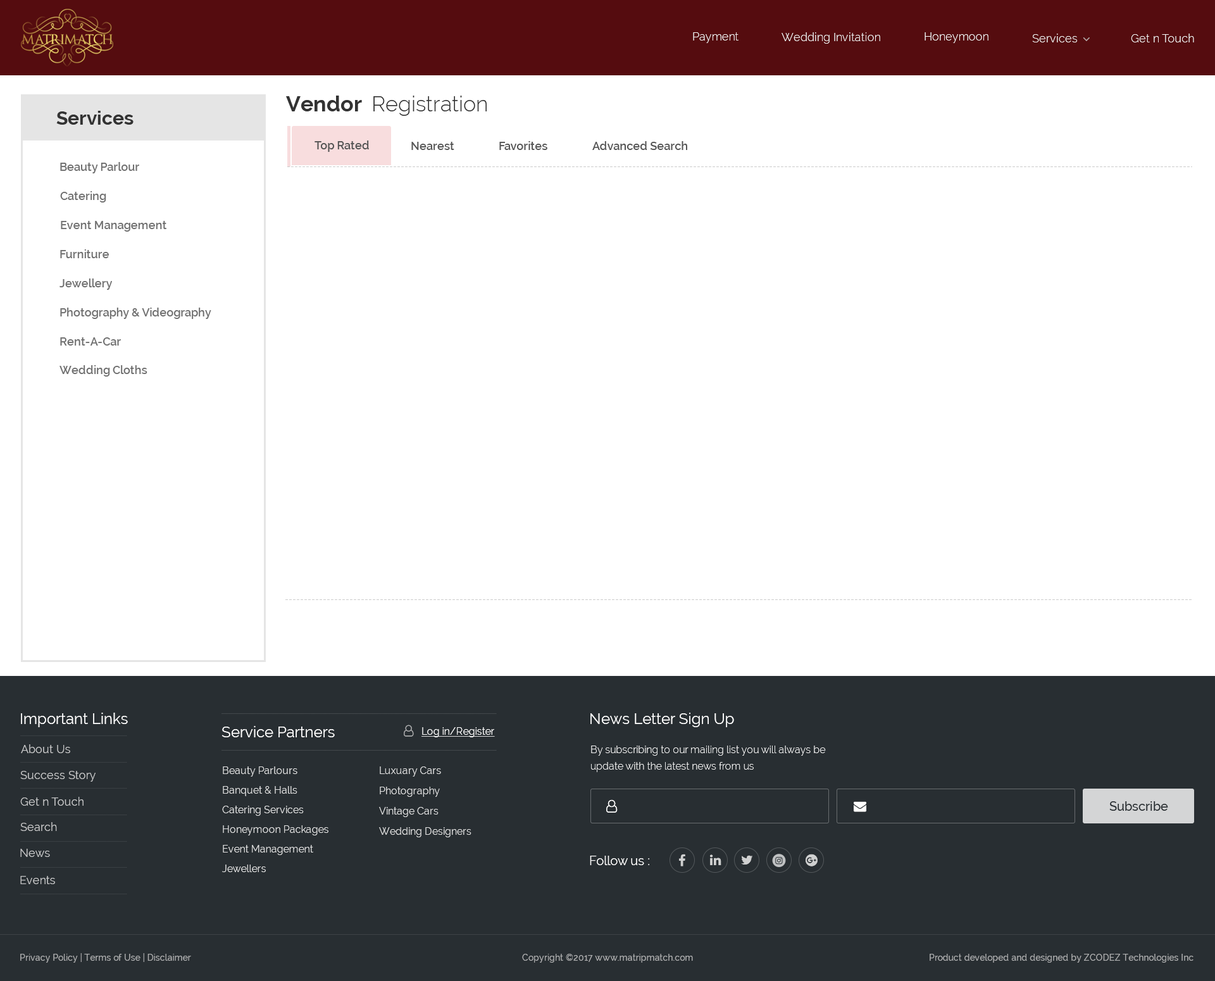
<style>
.page{position:relative;width:1215px;height:981px;background:#ffffff}
.page>*{position:absolute;margin:0}
.t1{font:11.4px "Raleway-Light";color:#ffffff}
.t2{font:21.5px "Raleway-Light";color:#333333}
.t3{font:21.5px "Raleway-Bold";color:#333333}
.t4{font:19px "Raleway-Bold";color:#333333}
.t5{font:11.4px "Raleway-SemiBold";color:#555555}
.t6{font:11.4px "Raleway-SemiBold";color:#707070}
.t7{font:15.2px "Raleway";color:#ffffff}
.t8{font:10.1px "Raleway";color:#ffffff;text-decoration:underline}
.t9{font:11.4px "Raleway";color:#c6c7c8}
.t10{font:10.1px/16.5px "Raleway-Light";color:#ffffff}
.t11{font:10.1px/19.6px "Raleway";color:#e0e0e0}
.t12{font:10.1px/20.3px "Raleway";color:#e0e0e0}
.t13{font:12.7px "Raleway-Medium";color:#282e32}
.t14{font:12.7px "Raleway";color:#ffffff}
.t15{font:8.9px "Raleway-Medium";color:#abacad}
</style>
<div class="page">
<p class="t1" style="left:693px;top:32px;width:46px;height:11px">Payment</p>
<p class="t1" style="left:782px;top:32px;width:98px;height:12px">Wedding Invitation</p>
<p class="t1" style="left:925px;top:32px;width:64px;height:11px">Honeymoon</p>
<p class="t1" style="left:1032px;top:34px;width:45px;height:8px">Services</p>
<p class="t1" style="left:1131px;top:34px;width:63px;height:8px">Get n Touch</p>
<p class="t2" style="left:286px;top:96px;width:201px;height:20px"><span class="t3">Vendor  </span>Registration</p>
<p class="t4" style="left:56px;top:111px;width:78px;height:14px">Services</p>
<p class="t5" style="left:315px;top:141px;width:54px;height:11px">Top Rated</p>
<p class="t5" style="left:411px;top:142px;width:43px;height:8px">Nearest</p>
<p class="t5" style="left:499px;top:141px;width:49px;height:9px">Favorites</p>
<p class="t5" style="left:592px;top:141px;width:95px;height:9px">Advanced Search</p>
<p class="t6" style="left:60px;top:162px;width:79px;height:11px">Beauty Parlour</p>
<p class="t6" style="left:60px;top:191px;width:46px;height:12px">Catering</p>
<p class="t6" style="left:61px;top:221px;width:106px;height:11px">Event Management</p>
<p class="t6" style="left:60px;top:249px;width:49px;height:9px">Furniture</p>
<p class="t6" style="left:60px;top:279px;width:52px;height:11px">Jewellery</p>
<p class="t6" style="left:60px;top:308px;width:151px;height:11px">Photography &amp; Videography</p>
<p class="t6" style="left:60px;top:337px;width:61px;height:9px">Rent-A-Car</p>
<p class="t6" style="left:60px;top:365px;width:87px;height:12px">Wedding Cloths</p>
<p class="t7" style="left:21px;top:713px;width:107px;height:14px">Important Links</p>
<p class="t7" style="left:591px;top:713px;width:143px;height:14px">News Letter Sign Up</p>
<p class="t7" style="left:222px;top:726px;width:113px;height:11px">Service Partners</p>
<p class="t8" style="left:422px;top:727px;width:73px;height:10px">Log in/Register</p>
<p class="t9" style="left:21px;top:744px;width:49px;height:9px">About Us</p>
<p class="t10" style="left:591px;top:746px;width:235px;height:26px">By subscribing to our mailing list you will always be <br>update with the latest news from us</p>
<p class="t9" style="left:20px;top:771px;width:76px;height:11px">Success Story</p>
<p class="t11" style="left:222px;top:767px;width:107px;height:105px">Beauty Parlours<br>Banquet &amp; Halls<br>Catering Services<br>Honeymoon Packages<br>Event Management<br>Jewellers</p>
<p class="t12" style="left:379px;top:767px;width:93px;height:70px">Luxuary Cars<br>Photography<br>Vintage Cars<br>Wedding Designers</p>
<p class="t9" style="left:20px;top:797px;width:64px;height:9px">Get n Touch</p>
<p class="t13" style="left:1110px;top:801px;width:59px;height:10px">Subscribe</p>
<p class="t9" style="left:20px;top:822px;width:37px;height:9px">Search</p>
<p class="t9" style="left:20px;top:849px;width:30px;height:8px">News</p>
<p class="t14" style="left:590px;top:856px;width:59px;height:9px">Follow us :</p>
<p class="t9" style="left:20px;top:876px;width:35px;height:8px">Events</p>
<p class="t15" style="left:20px;top:953px;width:171px;height:10px">Privacy Policy | Terms of Use | Disclaimer</p>
<p class="t15" style="left:522px;top:954px;width:171px;height:9px">Copyright ©2017 www.matripmatch.com</p>
<p class="t15" style="left:930px;top:954px;width:264px;height:9px">Product developed and designed by ZCODEZ Technologies Inc</p>
</div>
